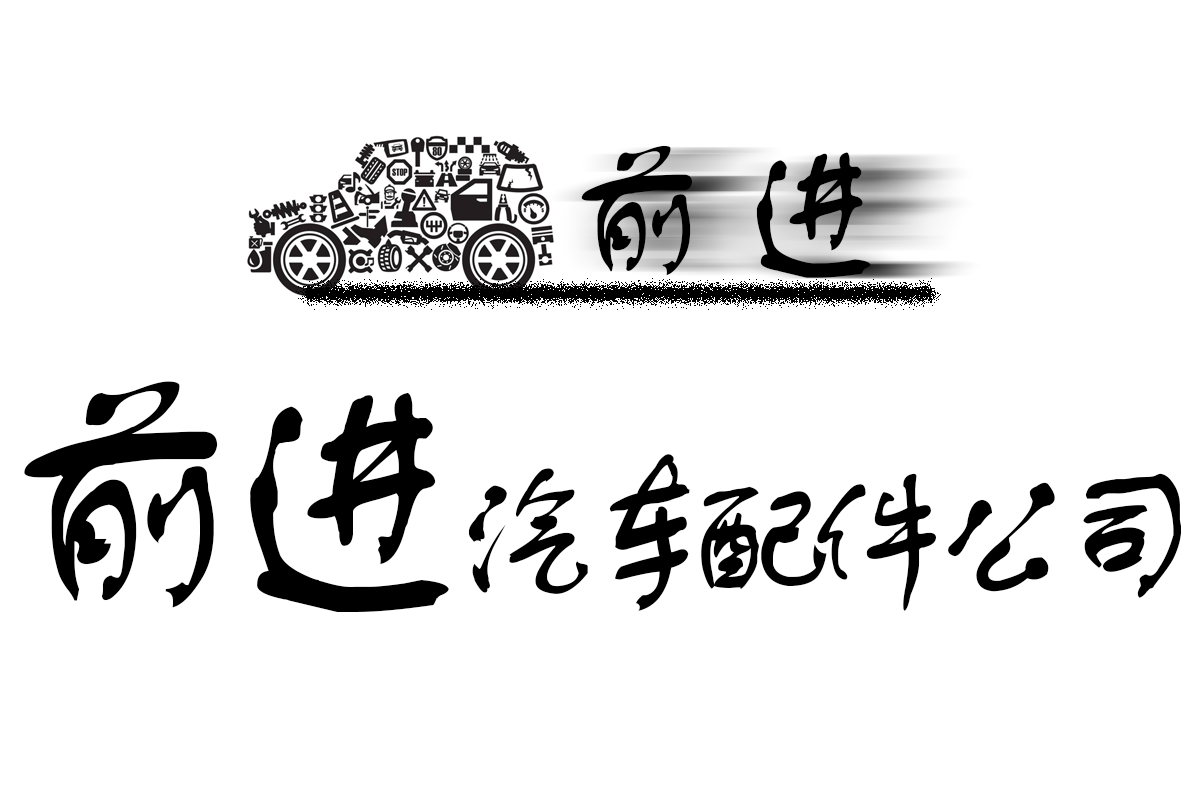
<style>
.page{position:relative;width:1200px;height:800px;background:#ffffff}
.page>*{position:absolute;margin:0}
.t1{font:166.7px "FZSTK--GBK1-0";color:#000000}
.t2{font:166.7px "FZSTK--GBK1-0";letter-spacing:-0.28em;color:#000000}
.t3{font:291.7px "FZSTK--GBK1-0";letter-spacing:-0.28em;color:#000000}
.t4{font:291.7px "FZSTK--GBK1-0";letter-spacing:-0.15em;color:#000000}
</style>
<div class="page">
<p class="t1" style="left:581px;top:145px;width:290px;height:133px">前进</p>
<p class="t2" style="left:24px;top:381px;width:1157px;height:231px"><span class="t3">前</span><span class="t4">进</span>汽车配件公司</p>
</div>
